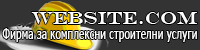
<style>
.page{position:relative;width:200px;height:50px;background:#333333}
.page>*{position:absolute;margin:0}
.t1{font:18px "EngraversMT";color:#ffffff}
.t2{font:15px "Tahoma";color:#fcfcfc;scale:0.69 1}
</style>
<div class="page">
<p class="t1" style="left:31px;top:12px;width:166px;height:12px">Website.com</p>
<p class="t2" style="left:2px;top:28px;width:195px;height:14px">Фирма за комплексни строителни услуги</p>
</div>
